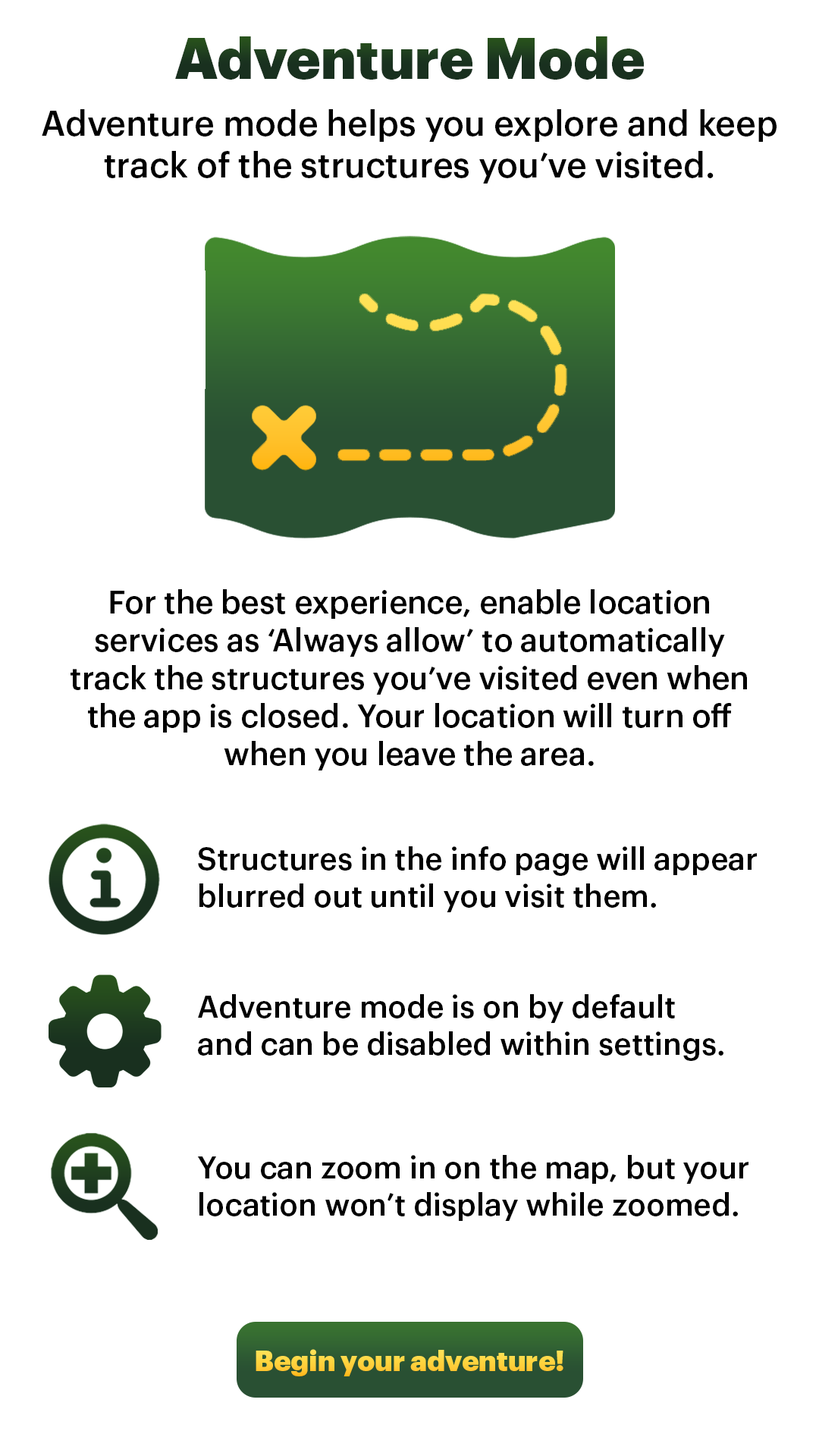
<style>
.page{position:relative;width:819px;height:1456px;background:#ffffff}
.page>*{position:absolute;margin:0}
.t1{font:56.9px "Graphik-Black";color:#1a321f}
.t2{font:34.8px "Graphik-Medium";color:#000000}
.t3{font:31.6px "Graphik-Medium";color:#000000}
.t4{font:31px "Graphik-Medium";color:#000000}
.t5{font:28.4px "Graphik-Black";color:#ffd33d}
</style>
<div class="page">
<p class="t1" style="left:175px;top:36px;width:469px;height:44px">Adventure Mode</p>
<p class="t2" style="left:42px;top:109px;width:735px;height:75px;text-align:center">Adventure mode helps you explore and keep track of the structures you’ve visited.</p>
<p class="t3" style="left:71px;top:589px;width:676px;height:181px;text-align:center">For the best experience, enable location services as ‘Always allow’ to automatically track the structures you’ve visited even when the app is closed. Your location will turn off when you leave the area.</p>
<p class="t4" style="left:198px;top:846px;width:559px;height:66px">Structures in the info page will appear blurred out until you visit them.</p>
<p class="t4" style="left:198px;top:994px;width:525px;height:67px">Adventure mode is on by default <br>and can be disabled within settings.</p>
<p class="t4" style="left:197px;top:1155px;width:551px;height:66px">You can zoom in on the map, but your location won’t display while zoomed.</p>
<p class="t5" style="left:256px;top:1349px;width:307px;height:27px">Begin your adventure!</p>
</div>
